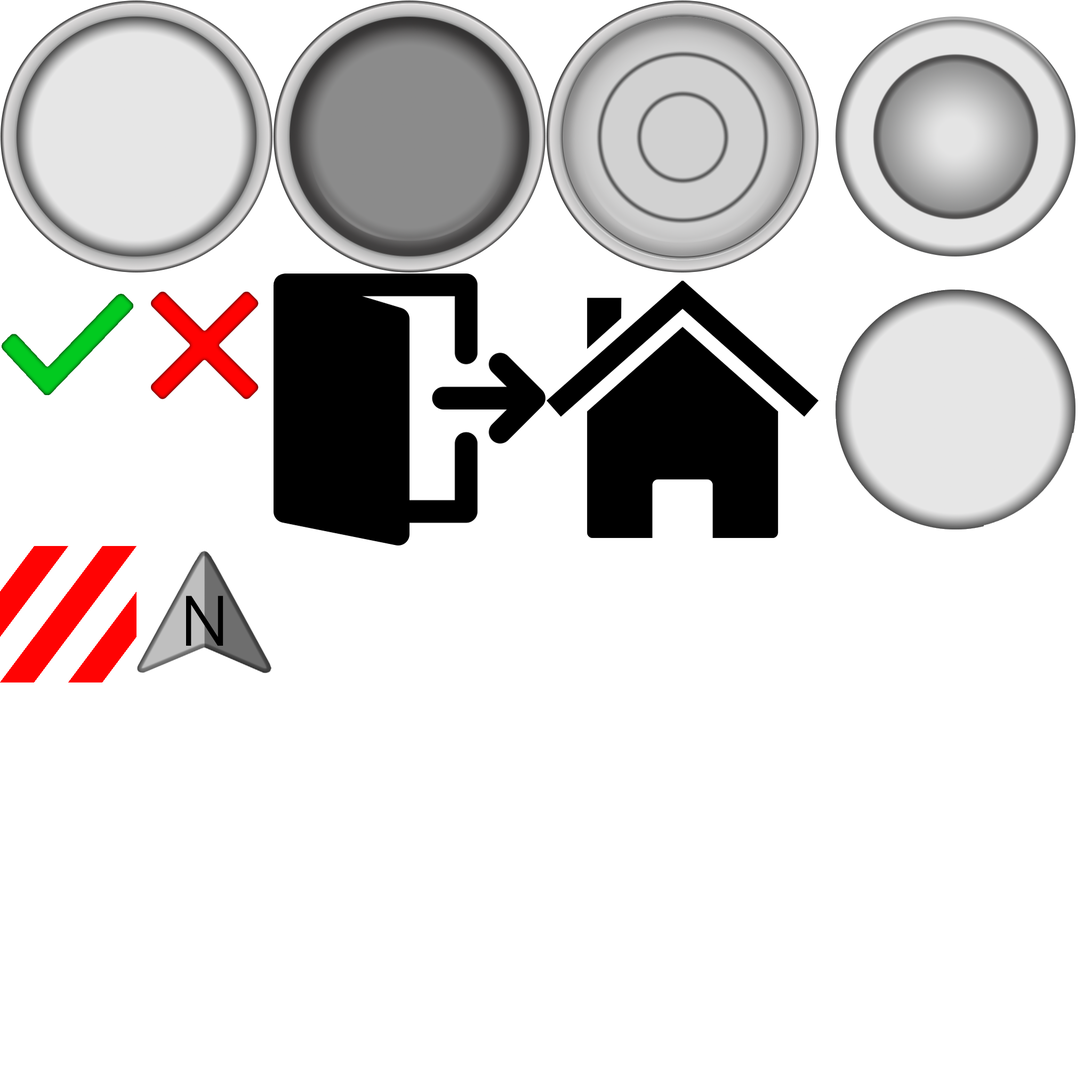
<style>
.page{position:relative;width:1092px;height:1092px;background:#ffffff}
.page>*{position:absolute;margin:0}
.t1{font:74.6px "SFCompactDisplay-Light";color:#000000}
</style>
<div class="page">
<p class="t1" style="left:186px;top:596px;width:37px;height:50px">N</p>
</div>
